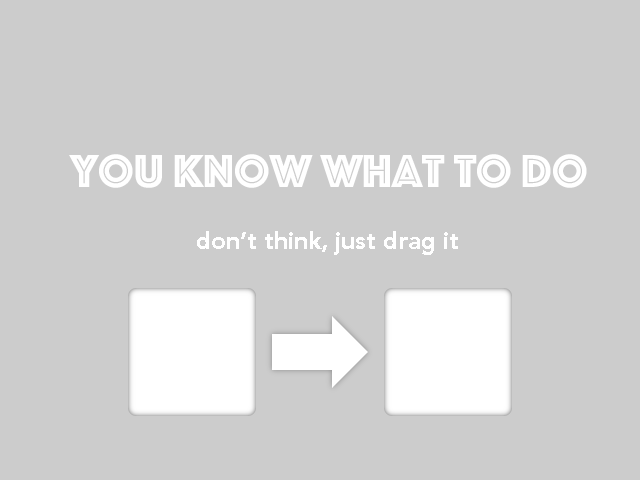
<style>
.page{position:relative;width:640px;height:480px;background:#cccccc}
.page>*{position:absolute;margin:0}
.t1{font:48px "Phosphate-Inline";color:#ffffff}
.t2{font:24px "Avenir-Black";color:#ffffff}
</style>
<div class="page">
<p class="t1" style="left:69px;top:154px;width:518px;height:34px">you know what to do</p>
<p class="t2" style="left:197px;top:231px;width:261px;height:24px">don’t think, just drag it</p>
</div>
